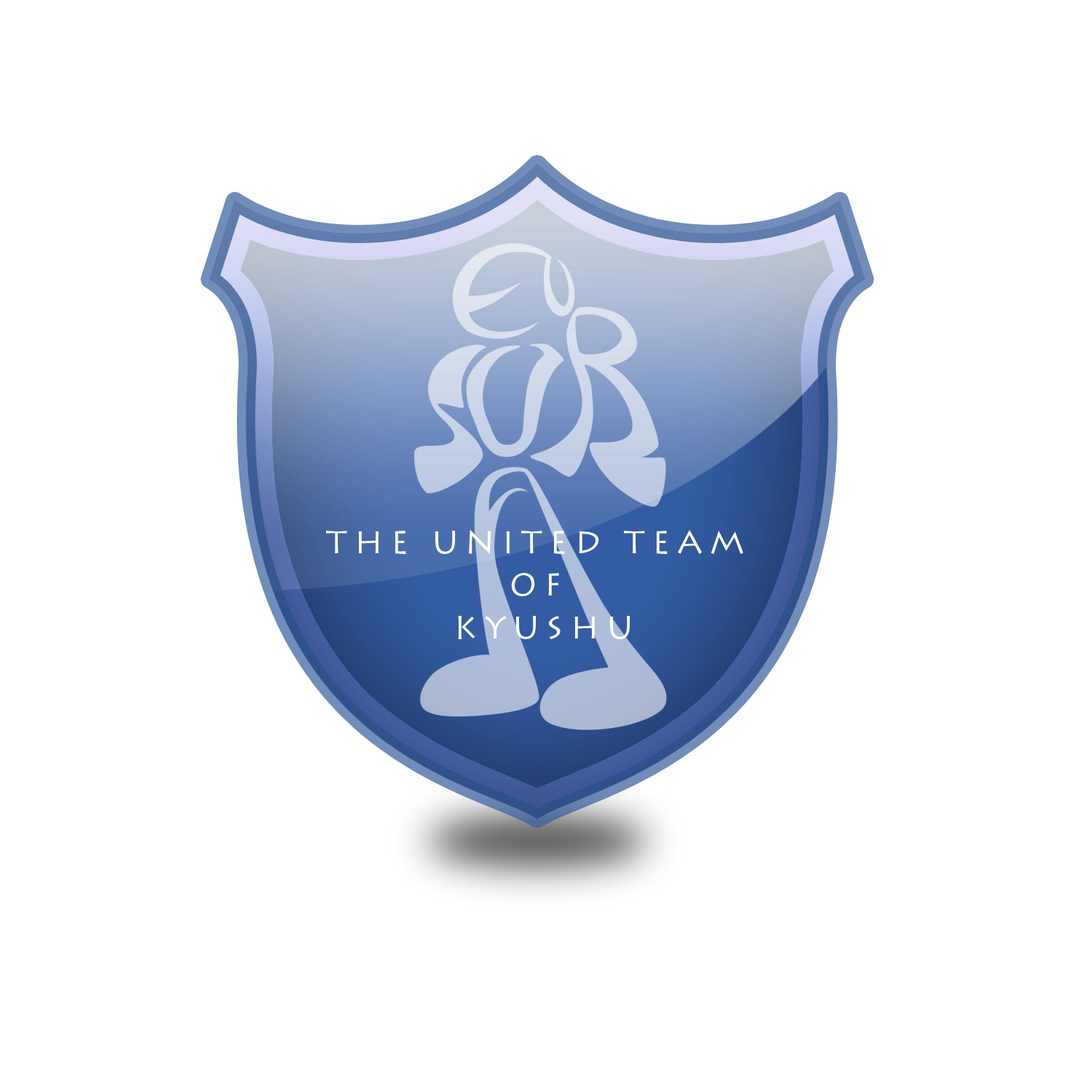
<style>
.page{position:relative;width:1092px;height:1092px;background:#ffffff}
.page>*{position:absolute;margin:0}
.t1{font:31.8px/42.5px "LithosPro-Regular";letter-spacing:0.22em;color:#ffffff}
</style>
<div class="page">
<p class="t1" style="left:326px;top:529px;width:417px;height:110px;text-align:center">THE UNITED TEAM <br>OF<br> KYUSHU</p>
</div>
